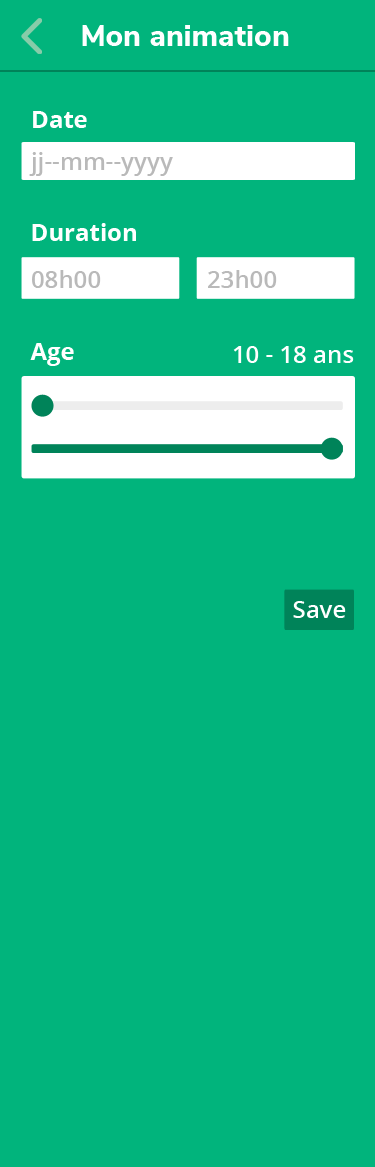
<style>
.page{position:relative;width:375px;height:1167px;background:#01b47c}
.page>*{position:absolute;margin:0}
.t1{font:30px "NunitoSans-ExtraBold";color:#ffffff}
.t2{font:24px "OpenSans-Bold";color:#ffffff}
.t3{font:24px "OpenSans-SemiBold";color:#b9b9b9}
.t4{font:24px "OpenSans-SemiBold";color:#ffffff}
</style>
<div class="page">
<p class="t1" style="left:82px;top:25px;width:207px;height:21px">Mon animation</p>
<p class="t2" style="left:33px;top:111px;width:54px;height:17px">Date</p>
<p class="t3" style="left:29px;top:152px;width:144px;height:24px">jj--mm--yyyy</p>
<p class="t2" style="left:32px;top:223px;width:104px;height:18px">Duration</p>
<p class="t3" style="left:32px;top:270px;width:69px;height:18px">08h00</p>
<p class="t3" style="left:208px;top:270px;width:69px;height:18px">23h00</p>
<p class="t2" style="left:30px;top:343px;width:44px;height:23px">Age</p>
<p class="t4" style="left:233px;top:346px;width:121px;height:17px">10 - 18 ans</p>
<p class="t4" style="left:293px;top:601px;width:53px;height:17px">Save</p>
</div>
